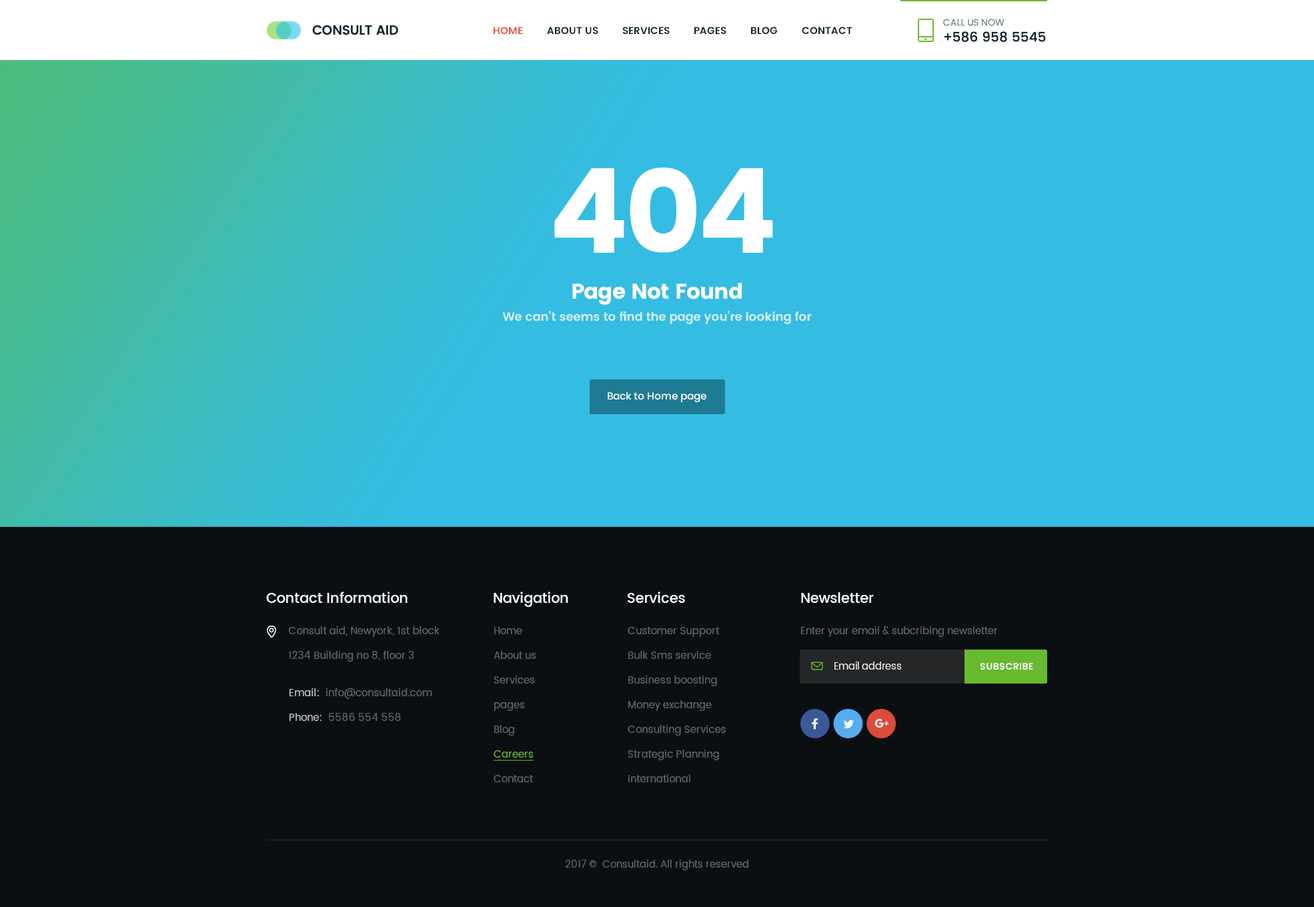
<style>
.page{position:relative;width:1314px;height:907px;background:#0b0f12}
.page>*{position:absolute;margin:0}
.t1{font:10px "Poppins-SemiBold";color:#10242b;text-transform:uppercase}
.t2{font:10px "Poppins-SemiBold";color:#e9563d;text-transform:uppercase}
.t3{font:13.3px "Poppins-Medium";letter-spacing:-0.005em;color:#10242b;text-transform:uppercase}
.t4{font:9.3px "Poppins-Regular";letter-spacing:-0.005em;color:#718389;text-transform:uppercase}
.t5{font:117.4px "Poppins";letter-spacing:-0.03em;color:#ffffff}
.t6{font:21.3px "Poppins";letter-spacing:-0.025em;color:#ffffff}
.t7{font:12px "Poppins-SemiBold";color:#d6f0f7}
.t8{font:10px "Poppins-Medium";color:#ffffff}
.t9{font:14px "Poppins-Medium";letter-spacing:-0.01em;color:#ffffff}
.t10{font:10px/24.7px "Poppins-Regular";letter-spacing:0.01em;color:#64676a}
.t11{font:10px/24.7px "Poppins-Regular";color:#64676a}
.t12{font:10px/24.7px "Poppins-Regular";color:#67b930;text-decoration:underline}
.t13{font:10px "Poppins-Regular";color:#64676a}
.t14{font:9.7px "Poppins-Regular";color:#ececec}
.t15{font:9.3px "Poppins-SemiBold";letter-spacing:0.025em;color:#ffffff;text-transform:uppercase}
.t16{font:10px/24.7px "Poppins-Regular";letter-spacing:0.01em;color:#c5c5c5}
.t17{font:10px/24.7px "Poppins-Regular";letter-spacing:0.01em;color:#c4c4c4}
</style>
<div class="page">
<p class="t1" style="left:494px;top:27px;width:359px;height:7px"><span class="t2">Home</span>         about us         services         Pages         blog         contact</p>
<p class="t3" style="left:943px;top:19px;width:103px;height:23px"><span class="t4">Call us now<br></span>+586 958 5545</p>
<p class="t5" style="left:554px;top:167px;width:219px;height:86px">404</p>
<p class="t6" style="left:572px;top:283px;width:170px;height:22px">Page Not Found</p>
<p class="t7" style="left:502px;top:311px;width:310px;height:13px">We can’t seems to find the page you’re looking for</p>
<p class="t8" style="left:608px;top:392px;width:98px;height:10px">Back to Home page</p>
<p class="t9" style="left:266px;top:592px;width:142px;height:11px">Contact Information</p>
<p class="t9" style="left:494px;top:592px;width:74px;height:15px">Navigation</p>
<p class="t9" style="left:628px;top:592px;width:57px;height:11px">Services</p>
<p class="t9" style="left:801px;top:592px;width:73px;height:11px">Newsletter</p>
<p class="t10" style="left:289px;top:626px;width:151px;height:36px">Consult aid, Newyork, 1st block <br>1234 Building no 8, floor 3</p>
<p class="t11" style="left:494px;top:627px;width:42px;height:156px">Home<br>About us<br>Services<br>pages<br>Blog<br><span class="t12">Careers<br></span>Contact</p>
<p class="t10" style="left:628px;top:627px;width:98px;height:156px">Customer Support<br>Bulk Sms service<br>Business boosting<br>Money exchange<br>Consulting Services<br>Strategic Planning<br>International</p>
<p class="t13" style="left:801px;top:626px;width:197px;height:11px">Enter your email &amp; subcribing newsletter</p>
<p class="t14" style="left:835px;top:662px;width:67px;height:8px">Email address</p>
<p class="t15" style="left:980px;top:663px;width:53px;height:7px">Subscribe</p>
<p class="t10" style="left:290px;top:688px;width:142px;height:33px"><span class="t16">Email:</span>  info@consultaid.com<br><span class="t17">Phone:</span>  5586 554 558</p>
<p class="t13" style="left:565px;top:860px;width:184px;height:11px">2017 ©  Consultaid. All rights reserved</p>
</div>
